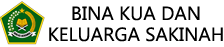
<style>
.page{position:relative;width:224px;height:47px;background:#ffffff}
.page>*{position:absolute;margin:0}
.t1{font:19px "MyanmarText";letter-spacing:0.005em;color:#000000}
</style>
<div class="page">
<p class="t1" style="left:72px;top:6px;width:128px;height:15px">BINA KUA DAN</p>
<p class="t1" style="left:49px;top:27px;width:174px;height:15px">KELUARGA SAKINAH</p>
</div>
